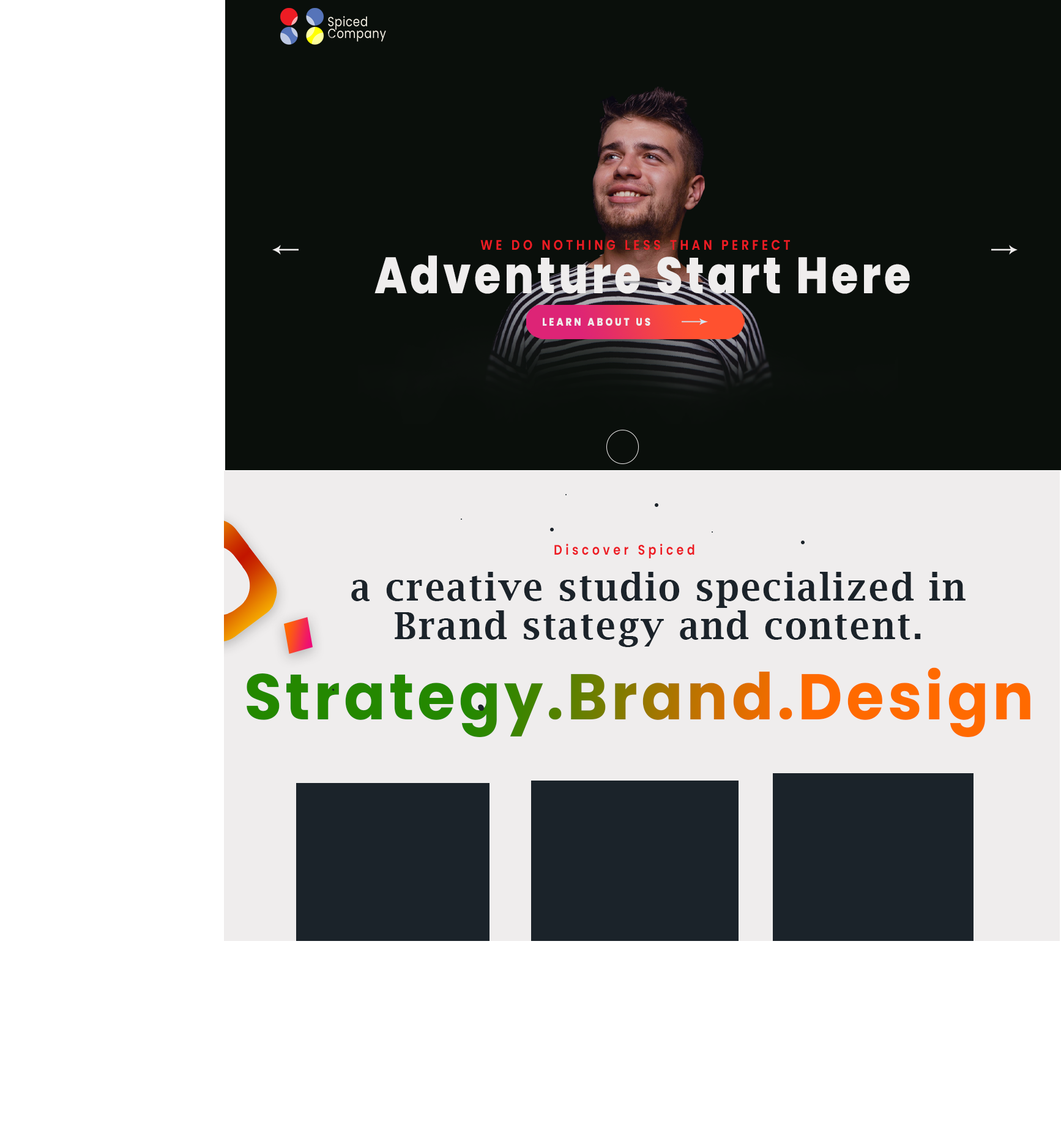
<style>
.page{position:relative;width:1061px;height:1124px;background:#ffffff}
.page>*{position:absolute;margin:0}
.t1{font:13.9px "Poppins-SemiBold";letter-spacing:0.28em;color:#ed1c24;text-transform:uppercase;scale:0.85 1}
.t2{font:50.9px "Poppins-ExtraBold";letter-spacing:0.08em;color:#efeded;scale:0.85 1}
.t3{font:13.9px "Poppins-SemiBold";letter-spacing:0.28em;color:#ed1c24;scale:0.85 1}
.t4{font:37px/38.6px "LucidaBright-Demi";letter-spacing:0.06em;color:#1b232a;scale:0.95 1}
.t5{font:37px/30px "LucidaBright-Demi";letter-spacing:0.06em;color:#1b232a;scale:0.95 1}
.t6{font:64.4px "Poppins-Bold";letter-spacing:0.06em;scale:0.95 1}
</style>
<div class="page">
<p class="t1" style="left:480px;top:240px;width:310px;height:10px">we do nothing less than perfect</p>
<p class="t2" style="left:375px;top:255px;width:535px;height:39px">Adventure Start Here</p>
<p class="t3" style="left:554px;top:543px;width:141px;height:15px">Discover Spiced</p>
<p class="t4" style="left:351px;top:572px;width:615px;height:75px;text-align:center">a creative studio specialized in Brand stategy and content<span class="t5">.</span></p>
<p class="t6" style="left:247px;top:667px;width:784px;height:70px">Strategy.Brand.Design</p>
</div>
